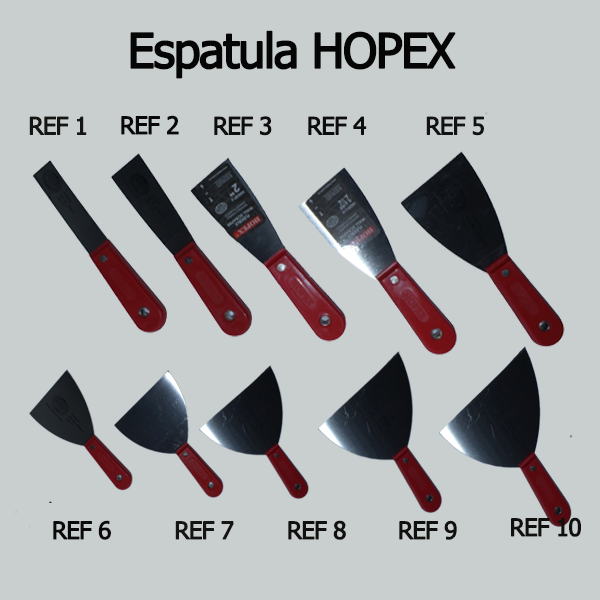
<style>
.page{position:relative;width:600px;height:600px;background:#c9cece}
.page>*{position:absolute;margin:0}
.t1{font:48px "Tahoma";letter-spacing:-0.05em;color:#050505;font-weight:bold}
.t2{font:24px "Tahoma";letter-spacing:-0.05em;color:#151514;font-weight:bold}
.t3{font:24px "Tahoma";letter-spacing:-0.05em;color:#080808;font-weight:bold}
.t4{font:24px "Tahoma";letter-spacing:-0.05em;color:#0e0e0d;font-weight:bold}
.t5{font:24px "Tahoma";letter-spacing:-0.05em;color:#0d0d0d;font-weight:bold}
.t6{font:24px "Tahoma";letter-spacing:-0.05em;color:#121212;font-weight:bold}
.t7{font:24px "Tahoma";letter-spacing:-0.05em;color:#0a0a0a;font-weight:bold}
.t8{font:24px "Tahoma";letter-spacing:-0.05em;color:#141413;font-weight:bold}
.t9{font:24px "Tahoma";letter-spacing:-0.05em;color:#10100f;font-weight:bold}
</style>
<div class="page">
<p class="t1" style="left:130px;top:30px;width:326px;height:49px">Espatula HOPEX</p>
<p class="t2" style="left:29px;top:116px;width:58px;height:19px">REF 1</p>
<p class="t3" style="left:121px;top:115px;width:58px;height:20px">REF 2</p>
<p class="t4" style="left:214px;top:116px;width:58px;height:20px">REF 3</p>
<p class="t5" style="left:308px;top:116px;width:59px;height:19px">REF 4</p>
<p class="t6" style="left:426px;top:116px;width:58px;height:20px">REF 5</p>
<p class="t7" style="left:53px;top:520px;width:58px;height:20px">REF 6</p>
<p class="t8" style="left:175px;top:521px;width:59px;height:19px">REF 7</p>
<p class="t9" style="left:288px;top:520px;width:58px;height:20px">REF 8</p>
<p class="t9" style="left:399px;top:520px;width:58px;height:20px">REF 9</p>
<p class="t9" style="left:511px;top:517px;width:70px;height:20px">REF 10</p>
</div>
